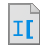
<style>
.page{position:relative;width:48px;height:48px;background:#ffffff}
.page>*{position:absolute;margin:0}
.t1{font:24px "Consolas";color:#058de3}
.t2{font:21px "Consolas-Bold";color:#058de3}
</style>
<div class="page">
<p class="t1" style="left:13px;top:20px;width:20px;height:19px">I<span class="t2">[</span></p>
</div>
